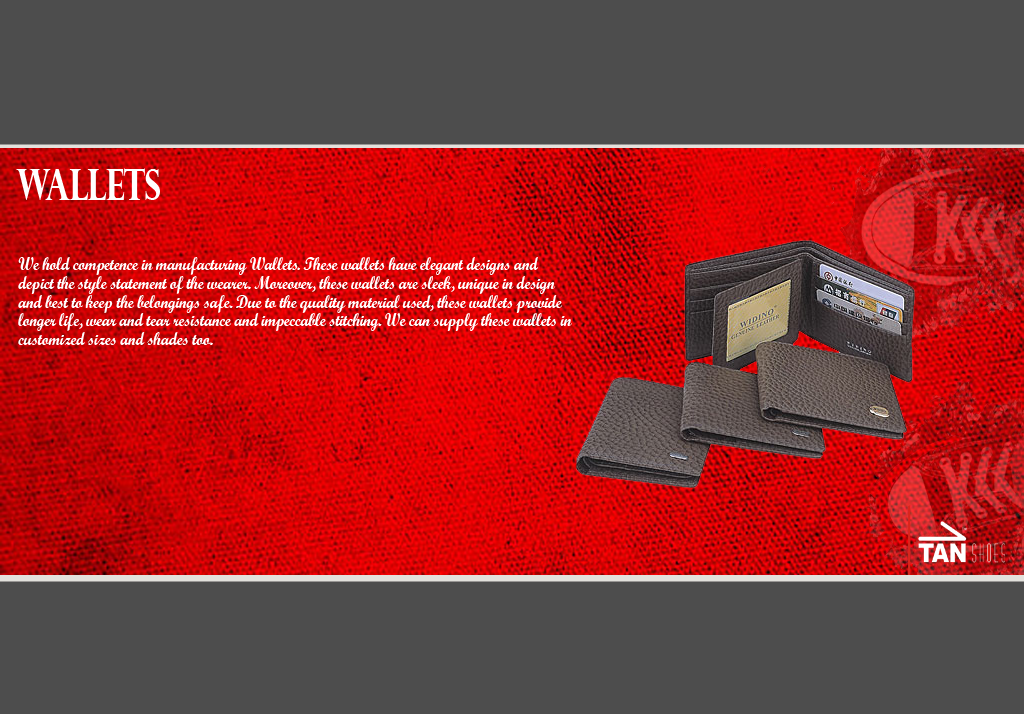
<style>
.page{position:relative;width:1024px;height:714px;background:#4d4d4d}
.page>*{position:absolute;margin:0}
.t1{font:43px "PerpetuaTitlingMT-Bold";letter-spacing:-0.025em;color:#ffffff;scale:0.73 1}
.t2{font:18px/6.2px "ScriptMTBold";letter-spacing:-0.025em;color:#ffffff;scale:0.9 1}
</style>
<div class="page">
<p class="t1" style="left:16px;top:168px;width:144px;height:32px">wallets</p>
<p class="t2" style="left:18px;top:257px;width:554px;height:88px">We hold competence in manufacturing Wallets. These wallets have elegant designs and <br><br><br>depict the style statement of the wearer. Moreover, these wallets are sleek, unique in design <br><br><br>and best to keep the belongings safe. Due to the quality material used, these wallets provide <br><br><br>longer life, wear and tear resistance and impeccable stitching. We can supply these wallets in <br><br><br>customized sizes and shades too.</p>
</div>
